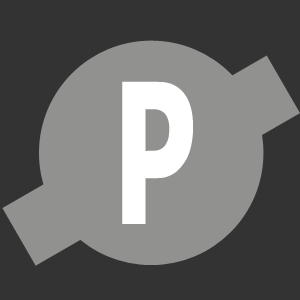
<style>
.page{position:relative;width:300px;height:300px;background:#333333}
.page>*{position:absolute;margin:0}
.t1{font:194.8px "BKoodakBold";color:#ffffff;scale:0.65 1}
</style>
<div class="page">
<p class="t1" style="left:122px;top:81px;width:71px;height:143px">P</p>
</div>
